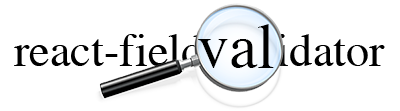
<style>
.page{position:relative;width:400px;height:111px;background:#ffffff}
.page>*{position:absolute;margin:0}
.t1{font:64.4px "Times-Roman";color:#000000}
.t2{font:46.6px "Times-Roman";color:#000000}
</style>
<div class="page">
<p class="t1" style="left:198px;top:24px;width:76px;height:44px">val</p>
<p class="t2" style="left:14px;top:34px;width:371px;height:32px">react-field-validator</p>
</div>
